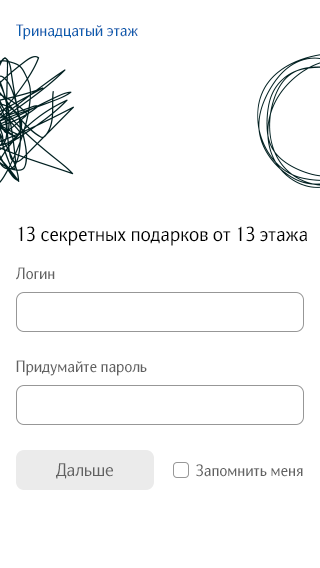
<style>
.page{position:relative;width:320px;height:568px;background:#ffffff}
.page>*{position:absolute;margin:0}
.t1{font:16px "NatGrotesk-Regular";color:#0b5cae}
.t2{font:20px "NatGrotesk-Regular";color:#000000}
.t3{font:16px "NatGrotesk-Regular";color:#616161}
.t4{font:18px "NatGrotesk-Regular";color:#616161}
</style>
<div class="page">
<p class="t1" style="left:16px;top:24px;width:122px;height:16px">Тринадцатый этаж</p>
<p class="t2" style="left:18px;top:226px;width:289px;height:20px">13 секретных подарков от 13 этажа</p>
<p class="t3" style="left:16px;top:267px;width:39px;height:13px">Логин</p>
<p class="t3" style="left:16px;top:360px;width:131px;height:16px">Придумайте пароль</p>
<p class="t4" style="left:56px;top:463px;width:57px;height:16px">Дальше</p>
<p class="t3" style="left:196px;top:464px;width:107px;height:13px">Запомнить меня</p>
</div>
